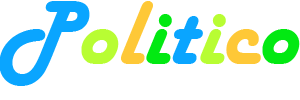
<style>
.page{position:relative;width:300px;height:100px;background:#ffffff}
.page>*{position:absolute;margin:0}
.t1{font:95px "HarlowSolid";color:#000000}
.t2{font:95px "HarlowSolid";color:#0aa5ff}
.t3{font:95px "HarlowSolid";color:#b8fd33}
.t4{font:95px "HarlowSolid";color:#fec837}
.t5{font:95px "HarlowSolid";color:#02e912}
</style>
<div class="page">
<p class="t1" style="left:0px;top:1px;width:300px;height:85px"><span class="t2">P</span><span class="t3">o</span><span class="t4">l</span><span class="t5">i</span><span class="t2">t</span><span class="t3">i</span><span class="t4">c</span><span class="t5">o</span>oooo</p>
</div>
